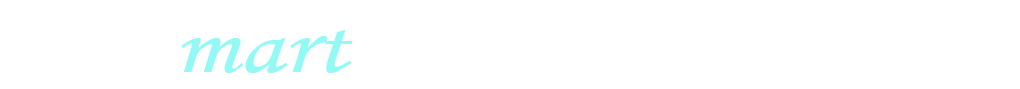
<style>
.page{position:relative;width:1020px;height:89px;background:#ffffff}
.page>*{position:absolute;margin:0}
.t1{font:82.1px "MonotypeCorsiva";color:#92f9f5;scale:1.28 1}
</style>
<div class="page">
<p class="t1" style="left:181px;top:30px;width:172px;height:43px">mart</p>
</div>
